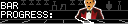
<style>
.page{position:relative;width:128px;height:24px;background:#000000}
.page>*{position:absolute;margin:0}
.t1{font:8px "Terminal";color:#ffffff}
</style>
<div class="page">
<p class="t1" style="left:1px;top:2px;width:17px;height:7px">BAR</p>
<p class="t1" style="left:1px;top:11px;width:51px;height:7px">PROGRESS:</p>
</div>
